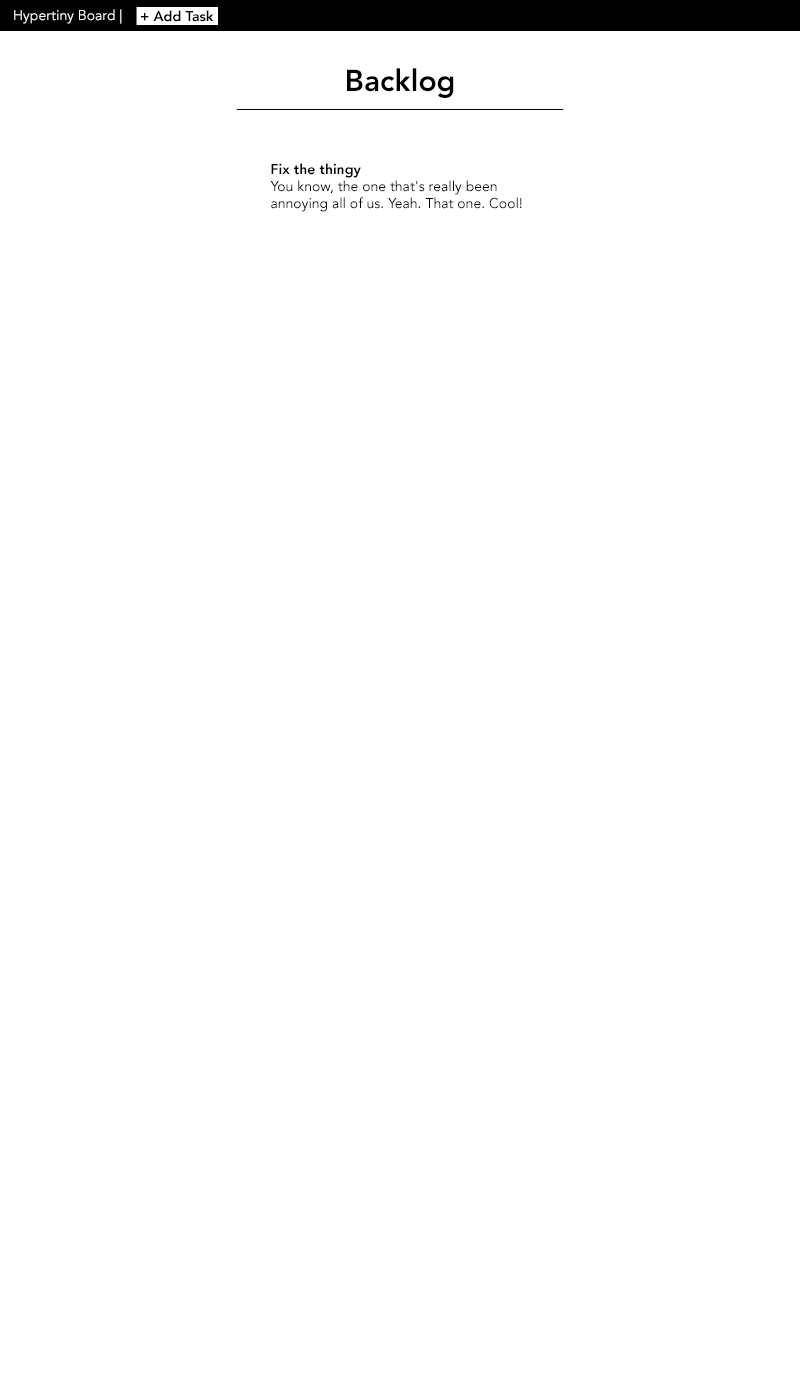
<style>
.page{position:relative;width:800px;height:1400px;background:#ffffff}
.page>*{position:absolute;margin:0}
.t1{font:14px "AvenirLTStd-Roman";color:#ffffff}
.t2{font:14px "AvenirLTStd-Heavy";color:#000000}
.t3{font:30px "AvenirLTStd-Heavy";color:#000000}
.t4{font:14px/17px "AvenirLTStd-Roman";color:#000000}
.t5{font:14px/17px "AvenirLTStd-Heavy";color:#000000}
</style>
<div class="page">
<p class="t1" style="left:14px;top:9px;width:108px;height:15px">Hypertiny Board |</p>
<p class="t2" style="left:141px;top:10px;width:73px;height:12px">+ Add Task</p>
<p class="t3" style="left:347px;top:68px;width:107px;height:30px">Backlog</p>
<p class="t4" style="left:270px;top:163px;width:252px;height:49px"><span class="t5">Fix the thingy<br></span>You know, the one that's really been annoying all of us. Yeah. That one. Cool!</p>
</div>
